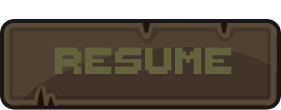
<style>
.page{position:relative;width:281px;height:110px}
.page>*{position:absolute;margin:0}
.t1{font:60px "ThaleahFat";color:#64633e}
</style>
<div class="page">
<p class="t1" style="left:55px;top:47px;width:177px;height:27px">Resume</p>
</div>
